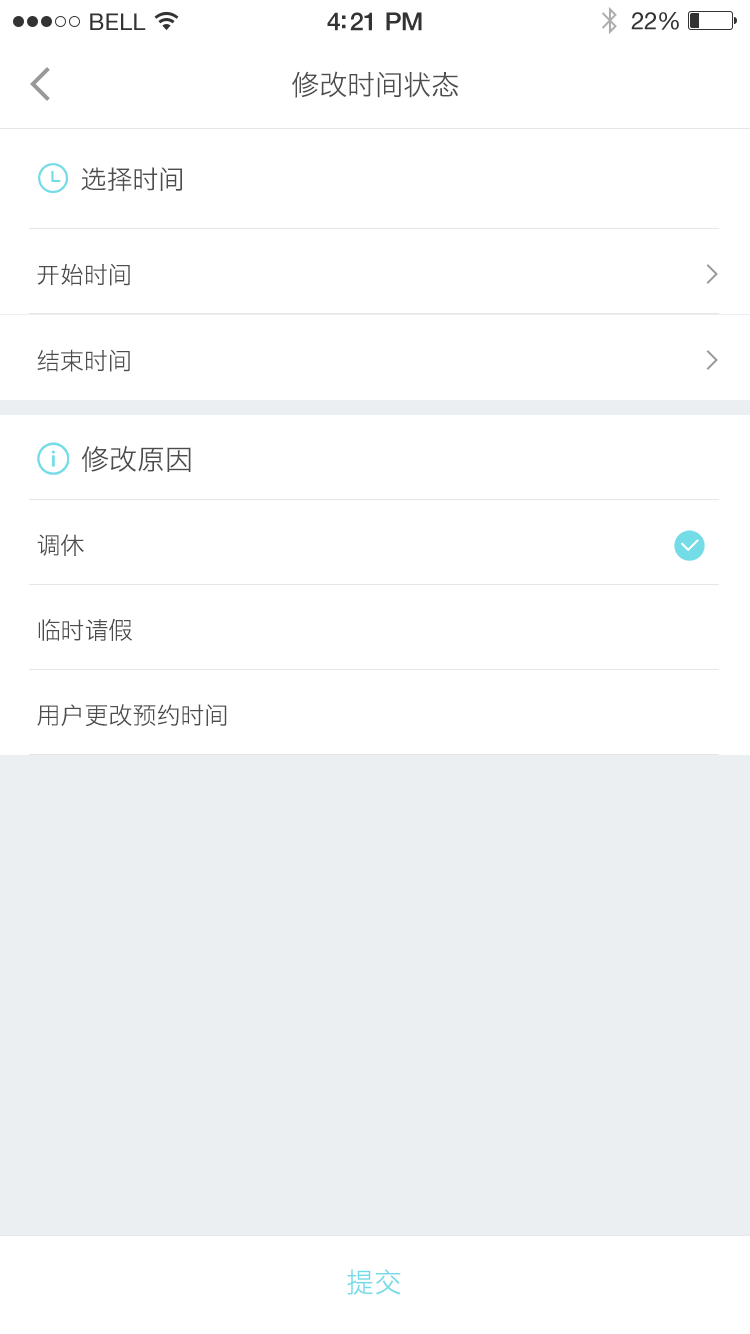
<style>
.page{position:relative;width:750px;height:1334px;background:#ffffff}
.page>*{position:absolute;margin:0}
.t1{font:28px "HiraginoSansGB-W3";color:#4d4d4d}
.t2{font:26px "HiraginoSansGB-W3";color:#4d4d4d}
.t3{font:24px "HiraginoSansGB-W3";color:#4c4c4c}
.t4{font:28px "HiraginoSansGB-W3";color:#4c4c4c}
.t5{font:28px "HiraginoSansGB-W3";color:#73dce6}
</style>
<div class="page">
<p class="t1" style="left:292px;top:71px;width:167px;height:27px">修改时间状态</p>
<p class="t2" style="left:81px;top:167px;width:101px;height:25px">选择时间</p>
<p class="t3" style="left:37px;top:263px;width:93px;height:23px">开始时间</p>
<p class="t3" style="left:37px;top:349px;width:93px;height:23px">结束时间</p>
<p class="t4" style="left:81px;top:446px;width:110px;height:26px">修改原因</p>
<p class="t3" style="left:37px;top:534px;width:47px;height:22px">调休</p>
<p class="t3" style="left:38px;top:618px;width:94px;height:23px">临时请假</p>
<p class="t3" style="left:37px;top:704px;width:190px;height:23px">用户更改预约时间</p>
<p class="t5" style="left:347px;top:1269px;width:54px;height:26px">提交</p>
</div>
